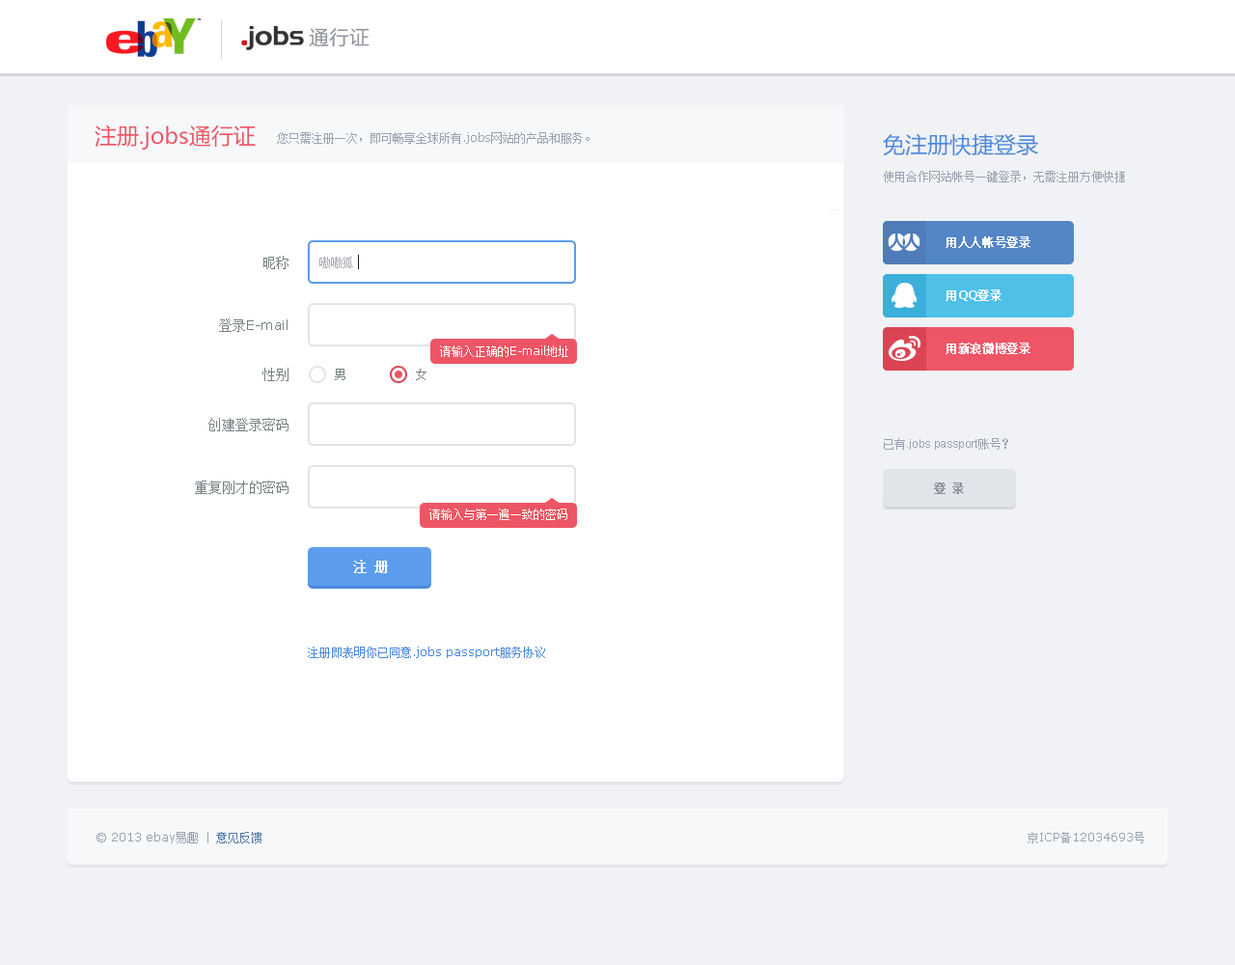
<style>
.page{position:relative;width:1235px;height:965px;background:#ffffff}
.page>*{position:absolute;margin:0}
.t1{font:20.3px "FZLTHJW--GB1-0";color:#8f9399}
.t2{font:22.2px "MicrosoftYaHei";color:#ed5565}
.t3{font:11.6px "SimSun";color:#99a3b1}
.t4{font:11.6px "Verdana";color:#99a3b1}
.t5{font:22.2px "MicrosoftYaHei";color:#4b89dc}
.t6{font:11.6px "SimSun";letter-spacing:0.025em;color:#ffffff;font-weight:bold}
.t7{font:13.5px "SimSun";color:#768082}
.t8{font:11.6px "SimSun";color:#abadb3}
.t9{font:11.6px "Verdana";letter-spacing:0.025em;color:#ffffff;font-weight:bold}
.t10{font:13.5px "Verdana";color:#768082}
.t11{font:11.6px "SimSun";color:#ffffff}
.t12{font:11.6px "Verdana";color:#ffffff}
.t13{font:12.5px "SimSun";color:#768082}
.t14{font:11.6px "ArialMT";color:#99a3b1}
.t15{font:11.6px "SimSun";color:#8f9399;font-weight:bold}
.t16{font:13.5px "SimSun";color:#ffffff;text-transform:uppercase;font-weight:bold}
.t17{font:11.6px "Verdana";color:#4b89dc}
.t18{font:11.6px "SimSun";color:#4b89dc}
.t19{font:11.6px "SimSun";color:#5076a8}
</style>
<div class="page">
<p class="t1" style="left:309px;top:28px;width:61px;height:19px">通行证</p>
<p class="t2" style="left:95px;top:125px;width:161px;height:25px">注册.jobs通行证</p>
<p class="t3" style="left:277px;top:132px;width:313px;height:12px">您只需注册一次，即可畅享全球所有<span class="t4">.jobs</span>网站的产品和服务。</p>
<p class="t5" style="left:883px;top:133px;width:156px;height:23px">免注册快捷登录</p>
<p class="t3" style="left:883px;top:171px;width:242px;height:11px">使用合作网站帐号一键登录，无需注册方便快捷</p>
<p class="t6" style="left:946px;top:236px;width:85px;height:12px">用人人帐号登录</p>
<p class="t6" style="left:946px;top:236px;width:85px;height:12px">用人人帐号登录</p>
<p class="t7" style="left:263px;top:256px;width:26px;height:13px">昵称</p>
<p class="t8" style="left:319px;top:257px;width:34px;height:11px">嗷嗷狐</p>
<p class="t9" style="left:946px;top:290px;width:56px;height:11px"><span class="t6">用</span>QQ<span class="t6">登录</span></p>
<p class="t9" style="left:946px;top:290px;width:56px;height:11px"><span class="t6">用</span>QQ<span class="t6">登录</span></p>
<p class="t10" style="left:219px;top:319px;width:69px;height:13px"><span class="t7">登录</span>E-mail</p>
<p class="t11" style="left:440px;top:346px;width:128px;height:11px">请输入正确的<span class="t12">E-mail</span>地址</p>
<p class="t6" style="left:946px;top:343px;width:85px;height:11px">用新浪微博登录</p>
<p class="t6" style="left:946px;top:343px;width:85px;height:11px">用新浪微博登录</p>
<p class="t7" style="left:263px;top:368px;width:26px;height:13px">性别</p>
<p class="t13" style="left:335px;top:369px;width:11px;height:11px">男</p>
<p class="t13" style="left:416px;top:369px;width:11px;height:11px">女</p>
<p class="t7" style="left:208px;top:418px;width:81px;height:13px">创建登录密码</p>
<p class="t14" style="left:884px;top:438px;width:125px;height:12px"><span class="t3">已有</span>.jobs passport<span class="t3">账号？</span></p>
<p class="t7" style="left:195px;top:481px;width:94px;height:13px">重复刚才的密码</p>
<p class="t15" style="left:934px;top:483px;width:30px;height:11px">登 录</p>
<p class="t11" style="left:430px;top:509px;width:138px;height:11px">请输入与第一遍一致的密码</p>
<p class="t16" style="left:353px;top:560px;width:35px;height:13px">注 册</p>
<p class="t17" style="left:308px;top:647px;width:237px;height:11px"><span class="t18">注册即表明你已同意</span>.jobs passport<span class="t18">服务协议</span></p>
<p class="t4" style="left:97px;top:832px;width:165px;height:12px">© 2013 ebay<span class="t3">易趣</span><span class="t3"> | </span><span class="t19">意见反馈</span></p>
<p class="t4" style="left:1028px;top:832px;width:117px;height:12px"><span class="t3">京</span>ICP<span class="t3">备</span>12034693<span class="t3">号</span></p>
</div>
